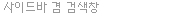
<style>
.page{position:relative;width:170px;height:15px;background:#ffffff}
.page>*{position:absolute;margin:0}
.t1{font:12px "À¸¶ä9";color:#999999}
</style>
<div class="page">
<p class="t1" style="left:4px;top:2px;width:95px;height:11px">사이드바 겸 검색창</p>
</div>
